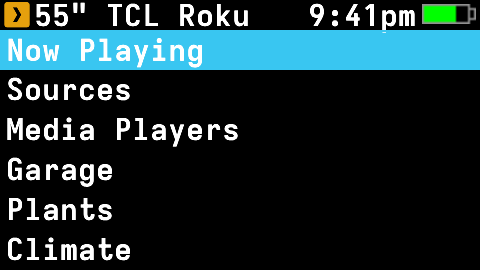
<style>
.page{position:relative;width:480px;height:270px;background:#000000}
.page>*{position:absolute;margin:0}
.t1{font:30px "Iosevka-Bold-Extended";color:#ffffff}
</style>
<div class="page">
<p class="t1" style="left:36px;top:2px;width:212px;height:25px">55" TCL Roku</p>
<p class="t1" style="left:310px;top:3px;width:105px;height:30px">9:41pm</p>
<p class="t1" style="left:8px;top:38px;width:194px;height:30px">Now Playing</p>
<p class="t1" style="left:8px;top:77px;width:122px;height:24px">Sources</p>
<p class="t1" style="left:7px;top:117px;width:231px;height:30px">Media Players</p>
<p class="t1" style="left:8px;top:157px;width:104px;height:30px">Garage</p>
<p class="t1" style="left:9px;top:197px;width:103px;height:24px">Plants</p>
<p class="t1" style="left:8px;top:237px;width:122px;height:24px">Climate</p>
</div>
